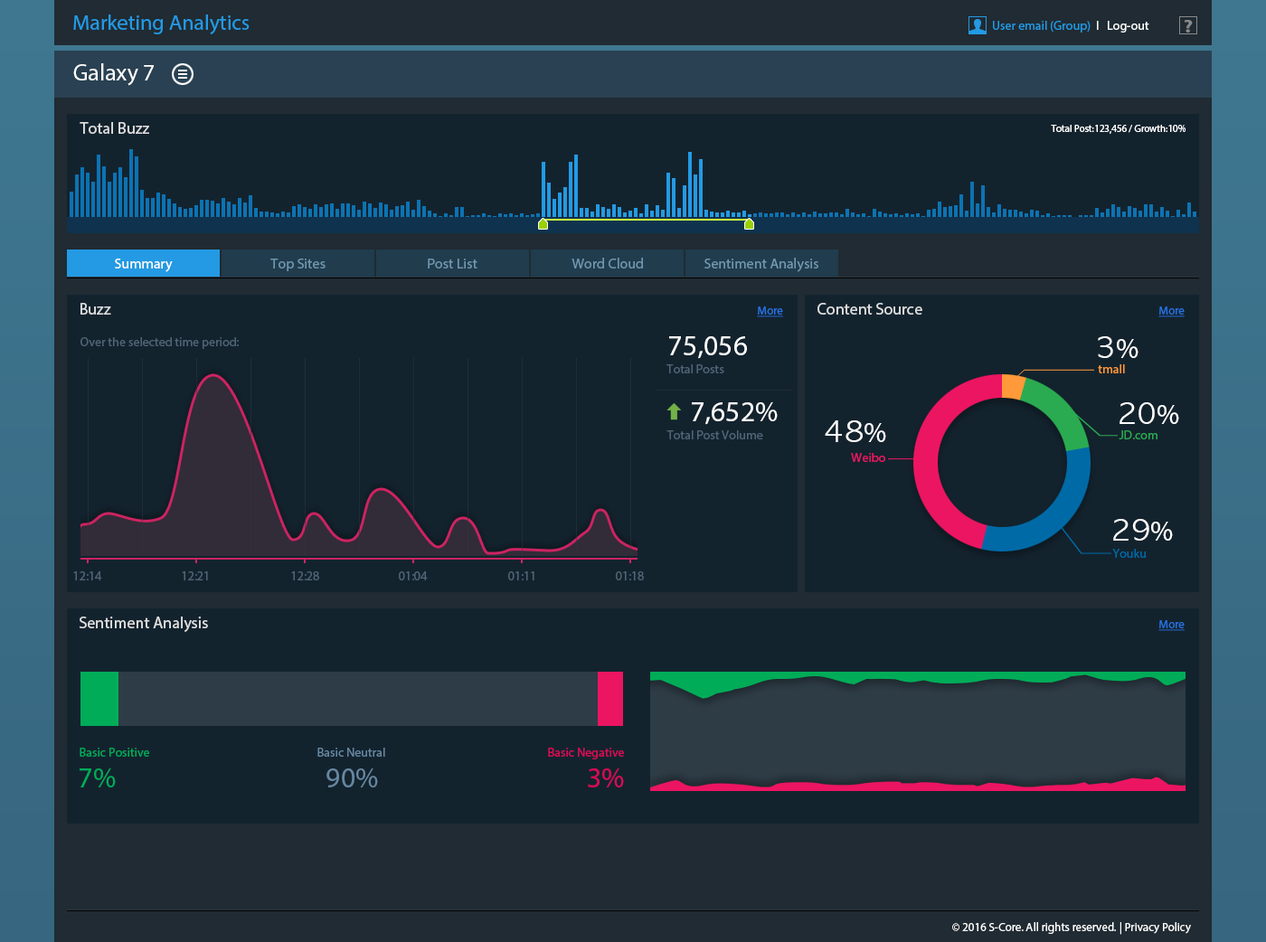
<style>
.page{position:relative;width:1266px;height:942px;background:#13232e}
.page>*{position:absolute;margin:0}
.t1{font:21.5px "MyriadPro-Regular";color:#239ae3}
.t2{font:12.7px "MyriadPro-Regular";color:#239ae3}
.t3{font:12.7px "MyriadPro-Regular";color:#ffffff}
.t4{font:18.1px "MyriadPro-Bold";color:#8a8a8a;scale:1.19 1}
.t5{font:23.5px "MyriadPro-Regular";color:#ffffff}
.t6{font:16.3px "MyriadPro-Regular";color:#dfdfdf}
.t7{font:9.9px "MyriadPro-Regular";color:#ffffff}
.t8{font:14.5px "MyriadPro-Regular";color:#7097af}
.t9{font:14.5px "MyriadPro-Regular";color:#ffffff}
.t10{font:11.8px "MyriadPro-Regular";color:#2874e6;text-decoration:underline}
.t11{font:12.7px "MyriadPro-Regular";color:#506577}
.t12{font:28.9px "MyriadPro-Regular";color:#ffffff}
.t13{font:28.9px "AppleGothic";color:#ffffff}
.t14{font:12.7px "MyriadPro-Regular";color:#ff9939}
.t15{font:16.3px "AppleGothic";color:#72b246}
.t16{font:12.7px "MyriadPro-Regular";color:#2bab51}
.t17{font:12.7px "MyriadPro-Regular";color:#ec1561}
.t18{font:12.7px "MyriadPro-Regular";color:#006aa7}
.t19{font:12.7px "MyriadPro-Regular";color:#00ac58}
.t20{font:12.7px "MyriadPro-Regular";color:#6687a1}
.t21{font:12.7px "MyriadPro-Regular";color:#dc0956}
.t22{font:28.9px "MyriadPro-Regular";color:#00ac58}
.t23{font:28.9px "MyriadPro-Regular";color:#6687a1}
.t24{font:28.9px "MyriadPro-Regular";color:#dc0956}
.t25{font:11.8px "MyriadPro-Regular";color:#ffffff}
</style>
<div class="page">
<p class="t1" style="left:73px;top:14px;width:177px;height:20px">Marketing Analytics</p>
<p class="t2" style="left:993px;top:21px;width:156px;height:12px">User email (Group) <span class="t3"> l   Log-out</span></p>
<p class="t4" style="left:1183px;top:20px;width:10px;height:13px">?</p>
<p class="t5" style="left:73px;top:63px;width:81px;height:23px">Galaxy 7</p>
<p class="t6" style="left:80px;top:122px;width:69px;height:12px">Total Buzz</p>
<p class="t7" style="left:1051px;top:125px;width:134px;height:9px">Total Post:123,456 / Growth:10%</p>
<p class="t8" style="left:571px;top:258px;width:72px;height:11px">Word Cloud</p>
<p class="t8" style="left:704px;top:258px;width:114px;height:14px">Sentiment Analysis</p>
<p class="t9" style="left:115px;top:259px;width:58px;height:13px">Summary</p>
<p class="t8" style="left:270px;top:259px;width:55px;height:12px">Top Sites</p>
<p class="t8" style="left:428px;top:259px;width:49px;height:10px">Post List</p>
<p class="t6" style="left:80px;top:303px;width:31px;height:12px">Buzz</p>
<p class="t6" style="left:817px;top:303px;width:105px;height:12px">Content Source</p>
<p class="t10" style="left:757px;top:306px;width:26px;height:11px">More</p>
<p class="t10" style="left:1158px;top:306px;width:26px;height:11px">More</p>
<p class="t11" style="left:80px;top:337px;width:159px;height:12px">Over the selected time period:</p>
<p class="t12" style="left:669px;top:336px;width:78px;height:23px">75,056</p>
<p class="t13" style="left:1098px;top:336px;width:40px;height:22px">3<span class="t12">%</span></p>
<p class="t11" style="left:666px;top:364px;width:58px;height:9px">Total Posts</p>
<p class="t14" style="left:1098px;top:364px;width:27px;height:9px">tmall</p>
<p class="t15" style="left:666px;top:403px;width:15px;height:17px;rotate:-90deg">➡</p>
<p class="t12" style="left:692px;top:402px;width:86px;height:23px"><span class="t13">  </span>7,652%</p>
<p class="t13" style="left:1119px;top:402px;width:60px;height:22px">20<span class="t12">%</span></p>
<p class="t13" style="left:825px;top:420px;width:61px;height:22px">48<span class="t12">%</span></p>
<p class="t11" style="left:666px;top:430px;width:97px;height:9px">Total Post Volume</p>
<p class="t16" style="left:1118px;top:430px;width:39px;height:9px">JD.com</p>
<p class="t17" style="left:851px;top:453px;width:34px;height:9px">Weibo</p>
<p class="t13" style="left:1113px;top:519px;width:60px;height:22px">29<span class="t12">%</span></p>
<p class="t18" style="left:1112px;top:549px;width:34px;height:9px">Youku</p>
<p class="t11" style="left:73px;top:571px;width:29px;height:9px">12:14</p>
<p class="t11" style="left:182px;top:571px;width:26px;height:9px">12:21</p>
<p class="t11" style="left:291px;top:571px;width:28px;height:9px">12:28</p>
<p class="t11" style="left:399px;top:571px;width:29px;height:9px">01:04</p>
<p class="t11" style="left:508px;top:571px;width:26px;height:9px">01:11</p>
<p class="t11" style="left:616px;top:571px;width:28px;height:9px">01:18</p>
<p class="t6" style="left:80px;top:617px;width:128px;height:15px">Sentiment Analysis</p>
<p class="t10" style="left:1158px;top:620px;width:26px;height:11px">More</p>
<p class="t19" style="left:80px;top:748px;width:69px;height:9px">Basic Positive</p>
<p class="t20" style="left:317px;top:748px;width:68px;height:9px">Basic Neutral</p>
<p class="t21" style="left:548px;top:748px;width:76px;height:11px">Basic Negative</p>
<p class="t22" style="left:80px;top:768px;width:36px;height:19px">7%</p>
<p class="t23" style="left:326px;top:768px;width:52px;height:19px">90%</p>
<p class="t24" style="left:588px;top:768px;width:36px;height:19px">3%</p>
<p class="t25" style="left:952px;top:922px;width:239px;height:13px">© 2016 S-Core. All rights reserved. | Privacy Policy</p>
</div>
